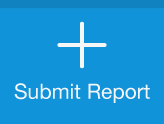
<style>
.page{position:relative;width:164px;height:124px;background:#1193d9}
.page>*{position:absolute;margin:0}
.t1{font:21px "HelveticaNeue";color:#f5f6f7}
</style>
<div class="page">
<p class="t1" style="left:14px;top:83px;width:136px;height:20px">Submit Report</p>
</div>
